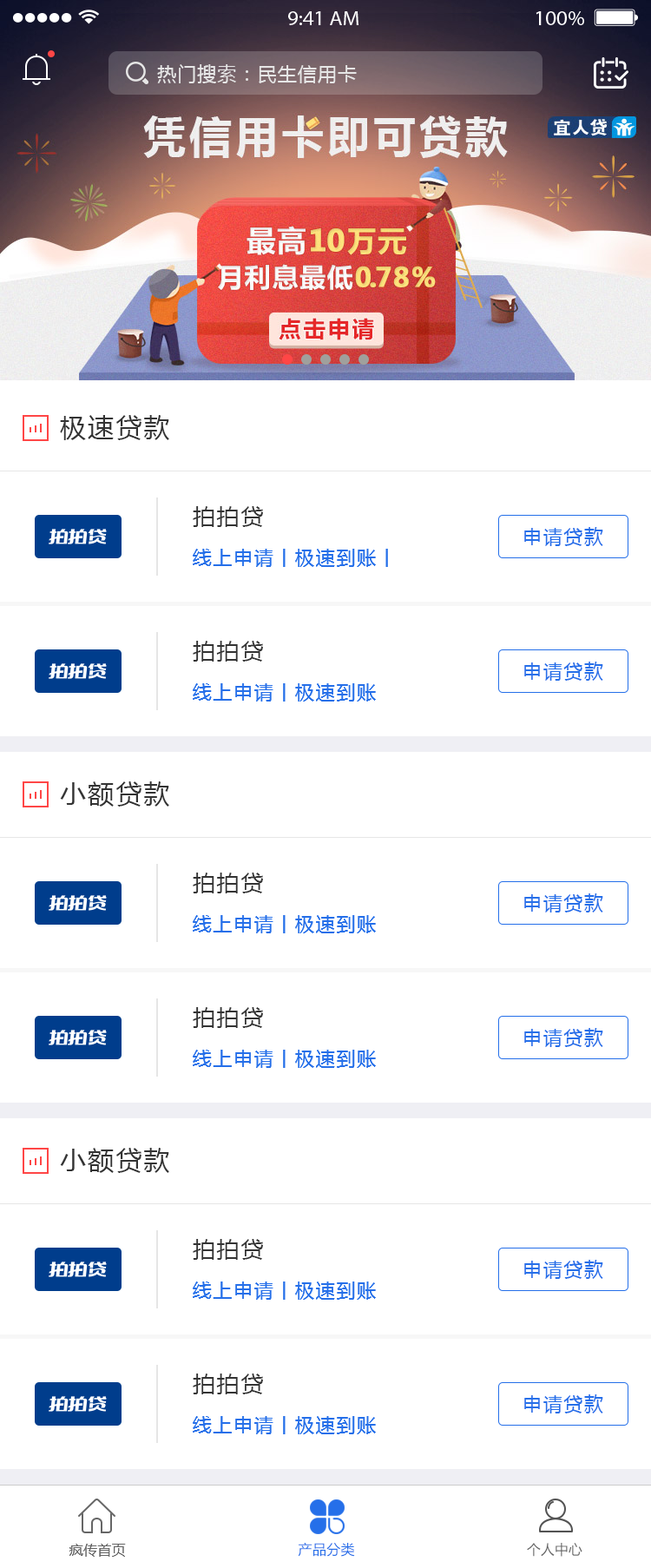
<style>
.page{position:relative;width:651px;height:1568px;background:#ffffff}
.page>*{position:absolute;margin:0}
.t1{font:26px "MicrosoftYaHei";letter-spacing:0.075em;color:#333333}
.t2{font:22.6px "MicrosoftYaHei";letter-spacing:0.075em;color:#333333}
.t3{font:19.1px "MicrosoftYaHei";letter-spacing:0.075em;color:#256fe9}
.t4{font:13.9px "MicrosoftYaHei";letter-spacing:0.025em;color:#666666}
.t5{font:13.9px "MicrosoftYaHei";letter-spacing:0.02em;color:#256fe9}
.t6{font:13.6px "MicrosoftYaHei";letter-spacing:0.02em;color:#666666}
</style>
<div class="page">
<p class="t1" style="left:60px;top:415px;width:109px;height:25px">极速贷款</p>
<p class="t2" style="left:193px;top:506px;width:70px;height:21px">拍拍贷</p>
<p class="t3" style="left:524px;top:527px;width:79px;height:19px">申请贷款</p>
<p class="t3" style="left:193px;top:549px;width:195px;height:18px">线上申请丨极速到账丨</p>
<p class="t2" style="left:193px;top:641px;width:70px;height:21px">拍拍贷</p>
<p class="t3" style="left:524px;top:662px;width:79px;height:19px">申请贷款</p>
<p class="t3" style="left:193px;top:683px;width:183px;height:19px">线上申请丨极速到账</p>
<p class="t1" style="left:60px;top:781px;width:109px;height:26px">小额贷款</p>
<p class="t2" style="left:193px;top:873px;width:70px;height:20px">拍拍贷</p>
<p class="t3" style="left:524px;top:893px;width:79px;height:19px">申请贷款</p>
<p class="t3" style="left:193px;top:915px;width:183px;height:18px">线上申请丨极速到账</p>
<p class="t2" style="left:193px;top:1007px;width:70px;height:21px">拍拍贷</p>
<p class="t3" style="left:524px;top:1028px;width:79px;height:19px">申请贷款</p>
<p class="t3" style="left:193px;top:1050px;width:183px;height:18px">线上申请丨极速到账</p>
<p class="t1" style="left:60px;top:1148px;width:109px;height:25px">小额贷款</p>
<p class="t2" style="left:193px;top:1239px;width:70px;height:21px">拍拍贷</p>
<p class="t3" style="left:524px;top:1260px;width:79px;height:19px">申请贷款</p>
<p class="t3" style="left:193px;top:1281px;width:183px;height:19px">线上申请丨极速到账</p>
<p class="t2" style="left:193px;top:1374px;width:70px;height:20px">拍拍贷</p>
<p class="t3" style="left:524px;top:1394px;width:79px;height:19px">申请贷款</p>
<p class="t3" style="left:193px;top:1416px;width:183px;height:18px">线上申请丨极速到账</p>
<p class="t4" style="left:69px;top:1544px;width:57px;height:13px">疯传首页</p>
<p class="t5" style="left:298px;top:1543px;width:57px;height:14px">产品分类</p>
<p class="t6" style="left:527px;top:1543px;width:56px;height:14px">个人中心</p>
</div>
